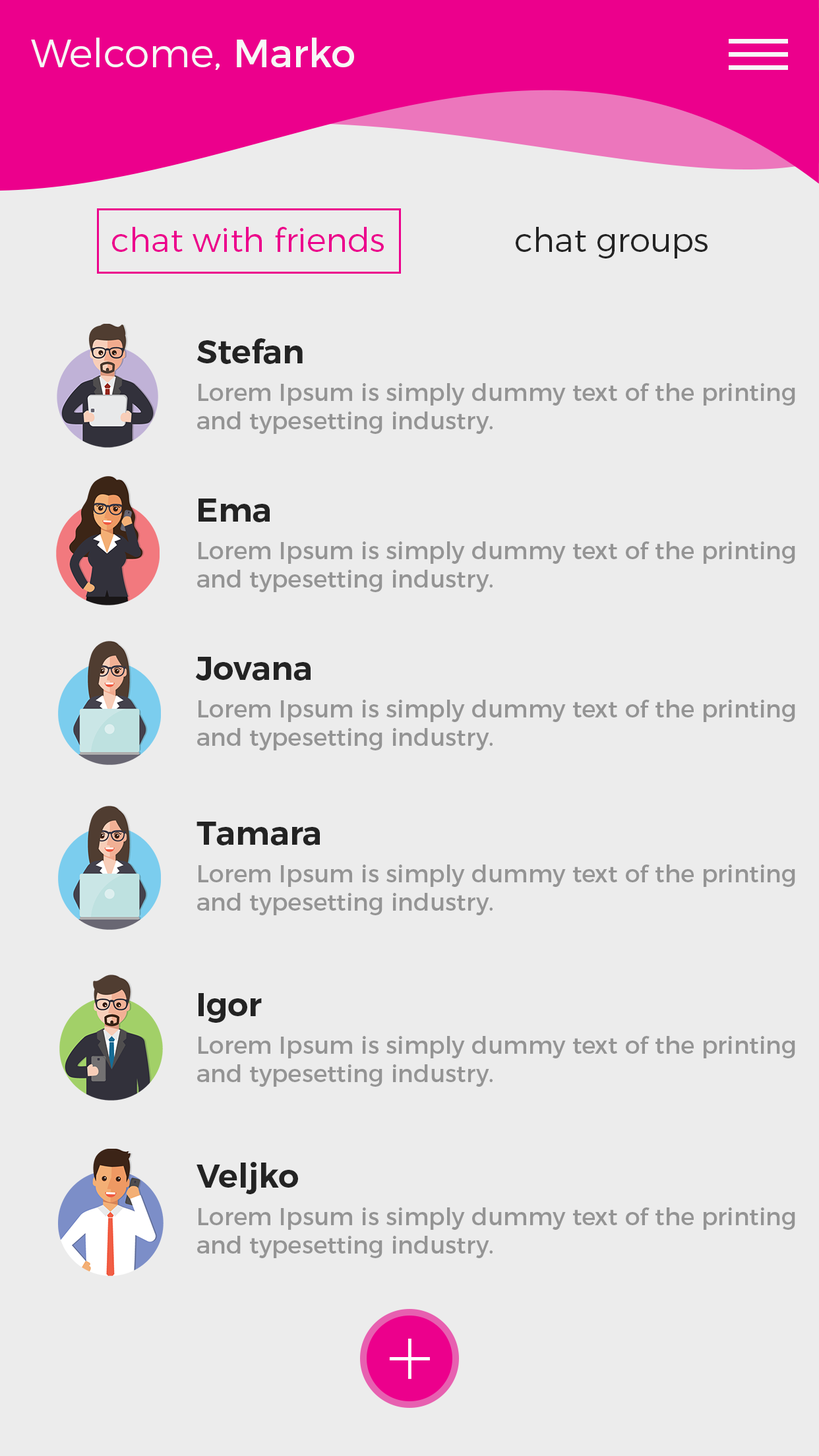
<style>
.page{position:relative;width:819px;height:1456px;background:#ececec}
.page>*{position:absolute;margin:0}
.t1{font:39.6px "Montserrat-Light";color:#f7f7f7}
.t2{font:39.6px "Montserrat-Regular";color:#f7f7f7}
.t3{font:33px "Montserrat-Light";color:#ec008c}
.t4{font:33px "Montserrat-Light";color:#232323}
.t5{font:33px "Montserrat-SemiBold";color:#232323}
.t6{font:23.7px "Montserrat-Regular";color:#949494}
.t7{font:98.9px "Montserrat-ExtraLight";color:#ffffff}
</style>
<div class="page">
<p class="t1" style="left:31px;top:38px;width:323px;height:32px">Welcome, <span class="t2">Marko</span></p>
<p class="t3" style="left:112px;top:227px;width:596px;height:31px">chat with friends<span class="t4">      chat groups</span></p>
<p class="t5" style="left:197px;top:338px;width:106px;height:26px">Stefan</p>
<p class="t6" style="left:197px;top:383px;width:598px;height:51px">Lorem Ipsum is simply dummy text of the printing <br>and typesetting industry.</p>
<p class="t5" style="left:198px;top:499px;width:72px;height:23px">Ema</p>
<p class="t6" style="left:197px;top:541px;width:598px;height:51px">Lorem Ipsum is simply dummy text of the printing <br>and typesetting industry.</p>
<p class="t5" style="left:195px;top:657px;width:116px;height:24px">Jovana</p>
<p class="t6" style="left:197px;top:700px;width:598px;height:50px">Lorem Ipsum is simply dummy text of the printing <br>and typesetting industry.</p>
<p class="t5" style="left:197px;top:822px;width:123px;height:23px">Tamara</p>
<p class="t6" style="left:197px;top:864px;width:598px;height:51px">Lorem Ipsum is simply dummy text of the printing <br>and typesetting industry.</p>
<p class="t5" style="left:198px;top:993px;width:64px;height:30px">Igor</p>
<p class="t6" style="left:197px;top:1036px;width:598px;height:51px">Lorem Ipsum is simply dummy text of the printing <br>and typesetting industry.</p>
<p class="t5" style="left:197px;top:1162px;width:101px;height:32px">Veljko</p>
<p class="t6" style="left:197px;top:1207px;width:598px;height:51px">Lorem Ipsum is simply dummy text of the printing <br>and typesetting industry.</p>
<p class="t7" style="left:389px;top:1339px;width:41px;height:40px">+</p>
</div>
